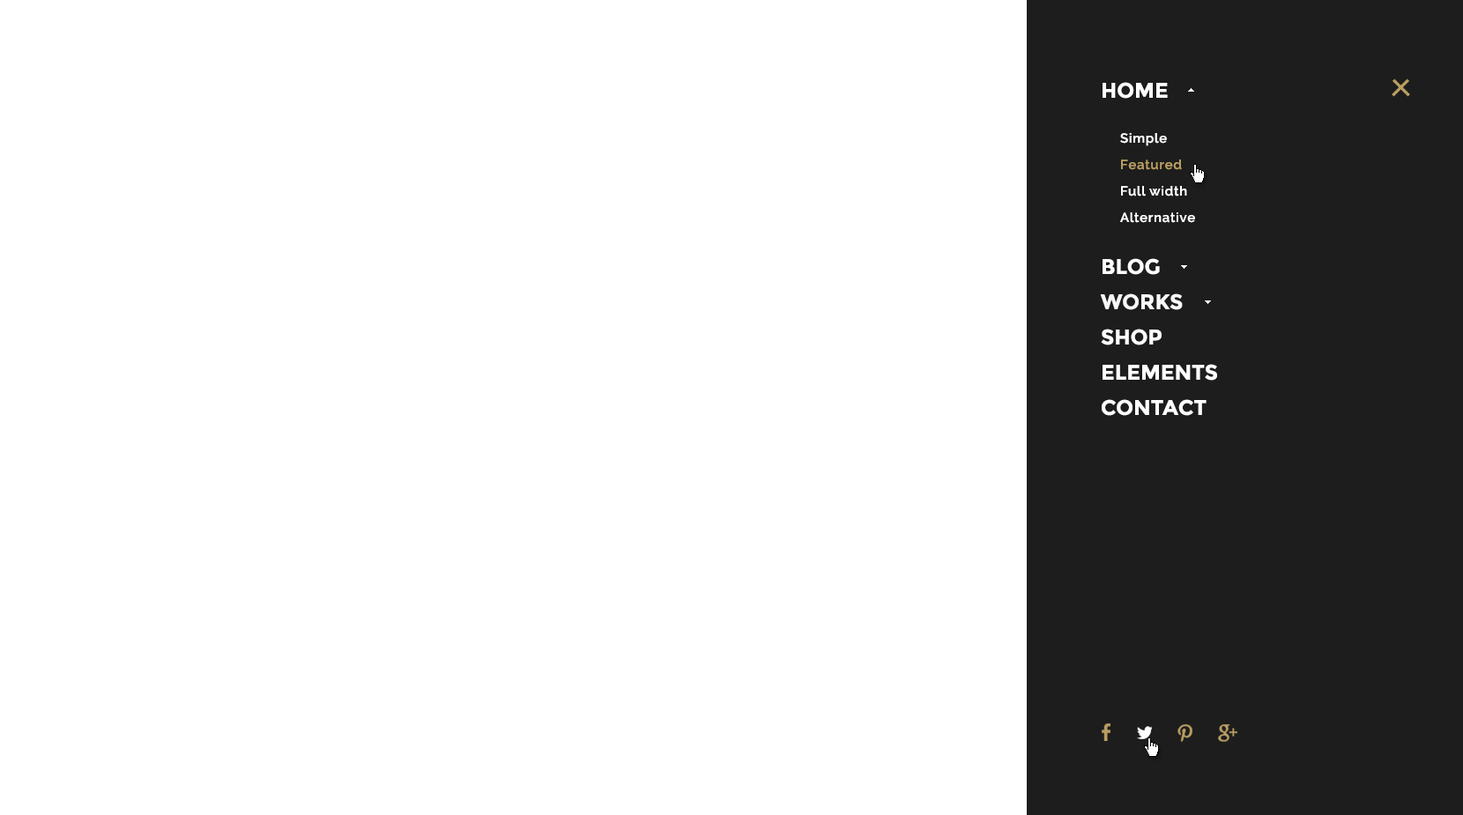
<style>
.page{position:relative;width:1463px;height:815px;background:#ffffff}
.page>*{position:absolute;margin:0}
.t1{font:21.1px/35.2px "Montserrat-Bold";color:#ffffff;text-transform:uppercase}
.t2{font:21.1px/35.2px "Montserrat-Bold";color:#f8f8f8;text-transform:uppercase}
.t3{font:13.2px/26.4px "Raleway-SemiBold";letter-spacing:0.05em;color:#ffffff}
.t4{font:13.2px/26.4px "Raleway-SemiBold";letter-spacing:0.05em;color:#ba9e62}
</style>
<div class="page">
<p class="t1" style="left:1100px;top:82px;width:117px;height:334px">Home<br><br><br><br><br>Blog<br><span class="t2">works<br></span>shop<br>ELEMENTS<br>Contact</p>
<p class="t3" style="left:1120px;top:133px;width:75px;height:90px">Simple<br><span class="t4">Featured<br></span>Full width<br>Alternative</p>
</div>
